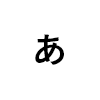
<style>
.page{position:relative;width:100px;height:100px;background:#ffffff}
.page>*{position:absolute;margin:0}
.t1{font:36px "KoburinaGoStd-W6";color:#000000}
</style>
<div class="page">
<p class="t1" style="left:35px;top:34px;width:29px;height:31px">あ</p>
</div>
